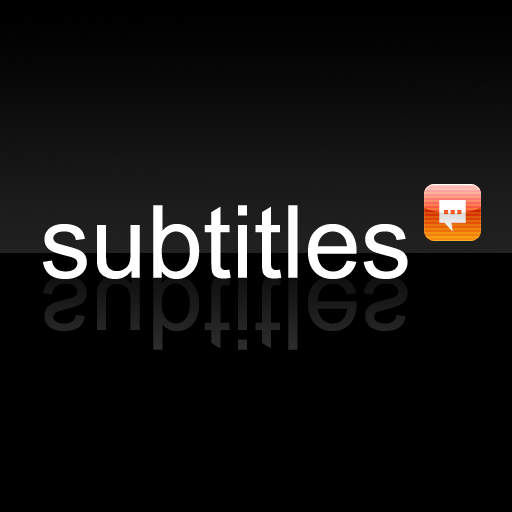
<style>
.page{position:relative;width:512px;height:512px;background:#000000}
.page>*{position:absolute;margin:0}
.t1{font:101.2px "ArialMT";color:#ffffff}
.t2{font:101.2px "ArialMT";color:#1c1c1c}
</style>
<div class="page">
<p class="t1" style="left:43px;top:205px;width:365px;height:74px">subtitles</p>
<p class="t2" style="left:43px;top:276px;width:365px;height:74px">subtitles</p>
</div>
